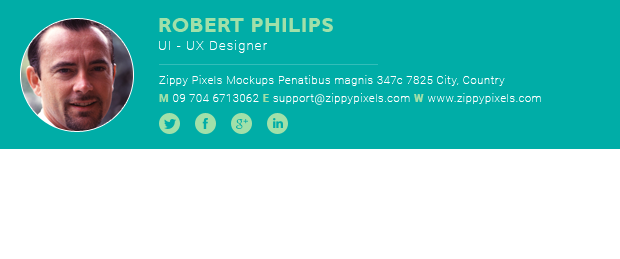
<style>
.page{position:relative;width:620px;height:259px;background:#00ada7}
.page>*{position:absolute;margin:0}
.t1{font:20px "GillSansMT-Bold";letter-spacing:0.02em;color:#a1e0a9;text-transform:uppercase}
.t2{font:13px "Roboto-Thin";letter-spacing:0.08em;color:#ffffff}
.t3{font:11px "Roboto-Thin";letter-spacing:0.06em;color:#ffffff}
.t4{font:11px "Roboto-Black";letter-spacing:0.06em;color:#a1e0a9}
</style>
<div class="page">
<p class="t1" style="left:159px;top:18px;width:174px;height:14px">Robert philips</p>
<p class="t2" style="left:159px;top:40px;width:108px;height:13px">UI - UX Designer</p>
<p class="t3" style="left:159px;top:75px;width:346px;height:11px">Zippy Pixels Mockups Penatibus magnis 347c 7825 City, Country</p>
<p class="t3" style="left:159px;top:93px;width:382px;height:12px"><span class="t4">M </span>09 704 6713062 <span class="t4">E </span>support@zippypixels.com <span class="t4">W </span>www.zippypixels.com</p>
</div>
